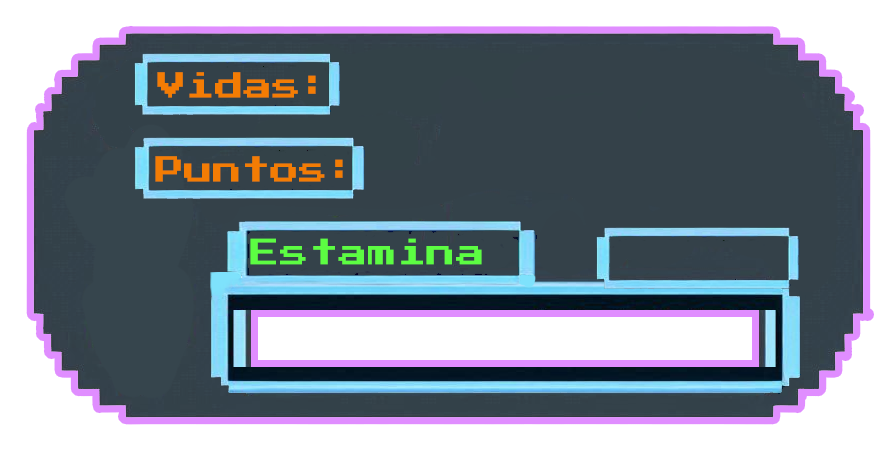
<style>
.page{position:relative;width:896px;height:450px;background:#ffffff}
.page>*{position:absolute;margin:0}
.t1{font:28.8px "PressStart2P";color:#f37c04}
.t2{font:29.3px "PressStart2P";color:#5cfd42}
</style>
<div class="page">
<p class="t1" style="left:157px;top:72px;width:159px;height:26px">Vidas:</p>
<p class="t1" style="left:155px;top:156px;width:188px;height:26px">Puntos:</p>
<p class="t2" style="left:250px;top:238px;width:232px;height:27px">Estamina</p>
</div>
